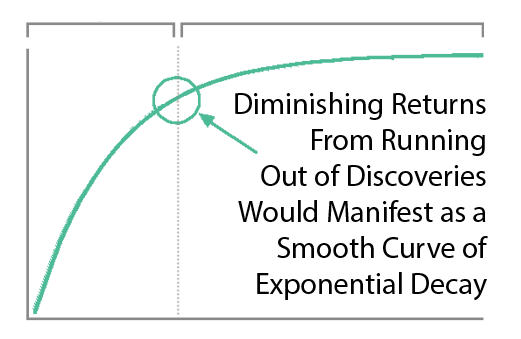
<style>
.page{position:relative;width:521px;height:339px;background:#ffffff}
.page>*{position:absolute;margin:0}
.t1{font:30px "MyriadPro-Regular";color:#000000}
</style>
<div class="page">
<p class="t1" style="left:235px;top:92px;width:253px;height:209px;text-align:right">Diminishing Returns<br>From Running<br>Out of Discoveries<br>Would Manifest as a<br>Smooth Curve of<br>Exponential Decay</p>
</div>
